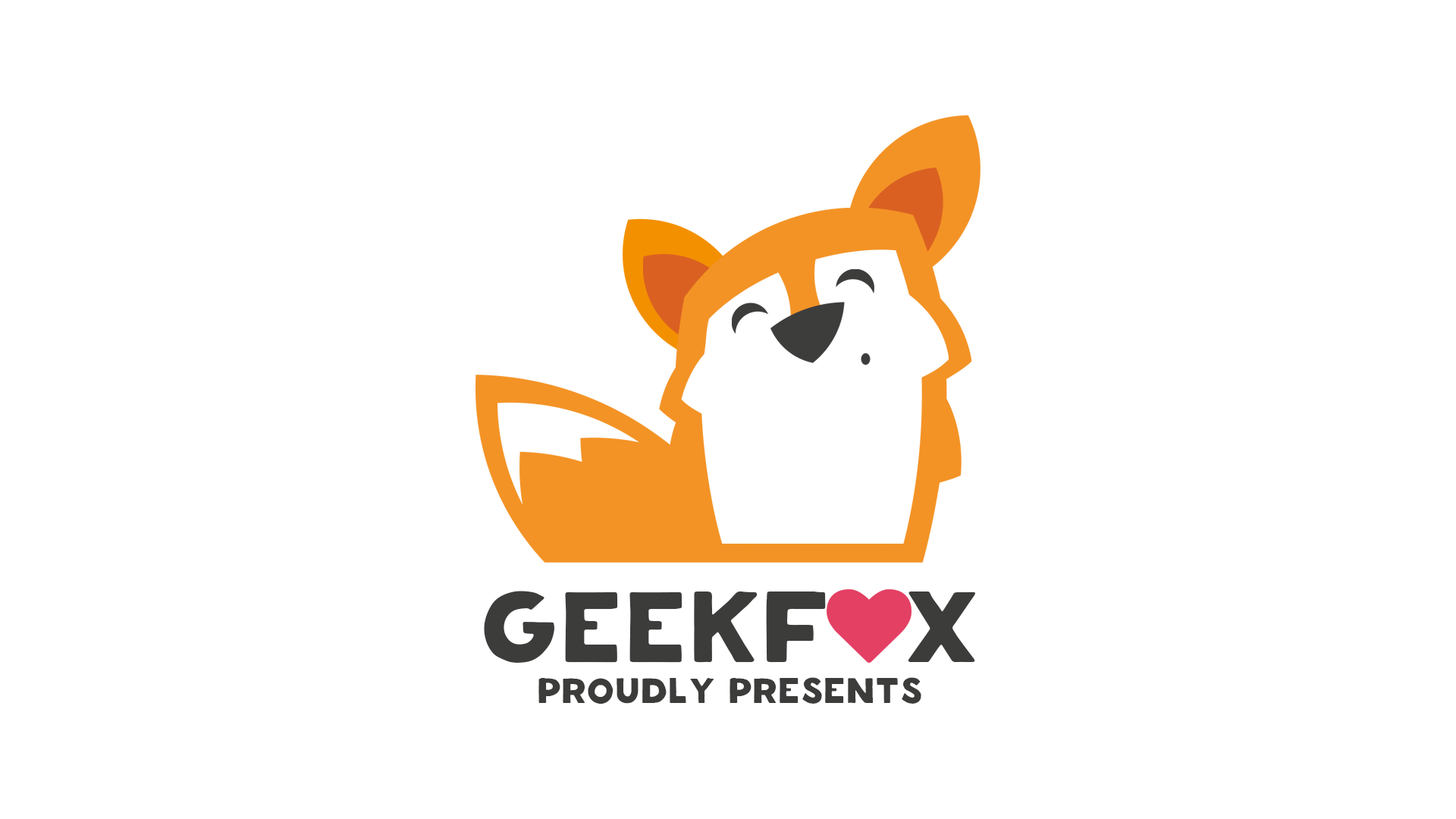
<style>
.page{position:relative;width:1456px;height:819px;background:#ffffff}
.page>*{position:absolute;margin:0}
.t1{font:110.3px "Shadow-Regular";color:#3c3c3b}
.t2{font:39px "Shadow-Regular";color:#3c3c3b}
</style>
<div class="page">
<p class="t1" style="left:484px;top:591px;width:492px;height:72px">GEEKF  X</p>
<p class="t2" style="left:538px;top:677px;width:383px;height:27px">PROUDLY PRESENTS</p>
</div>
